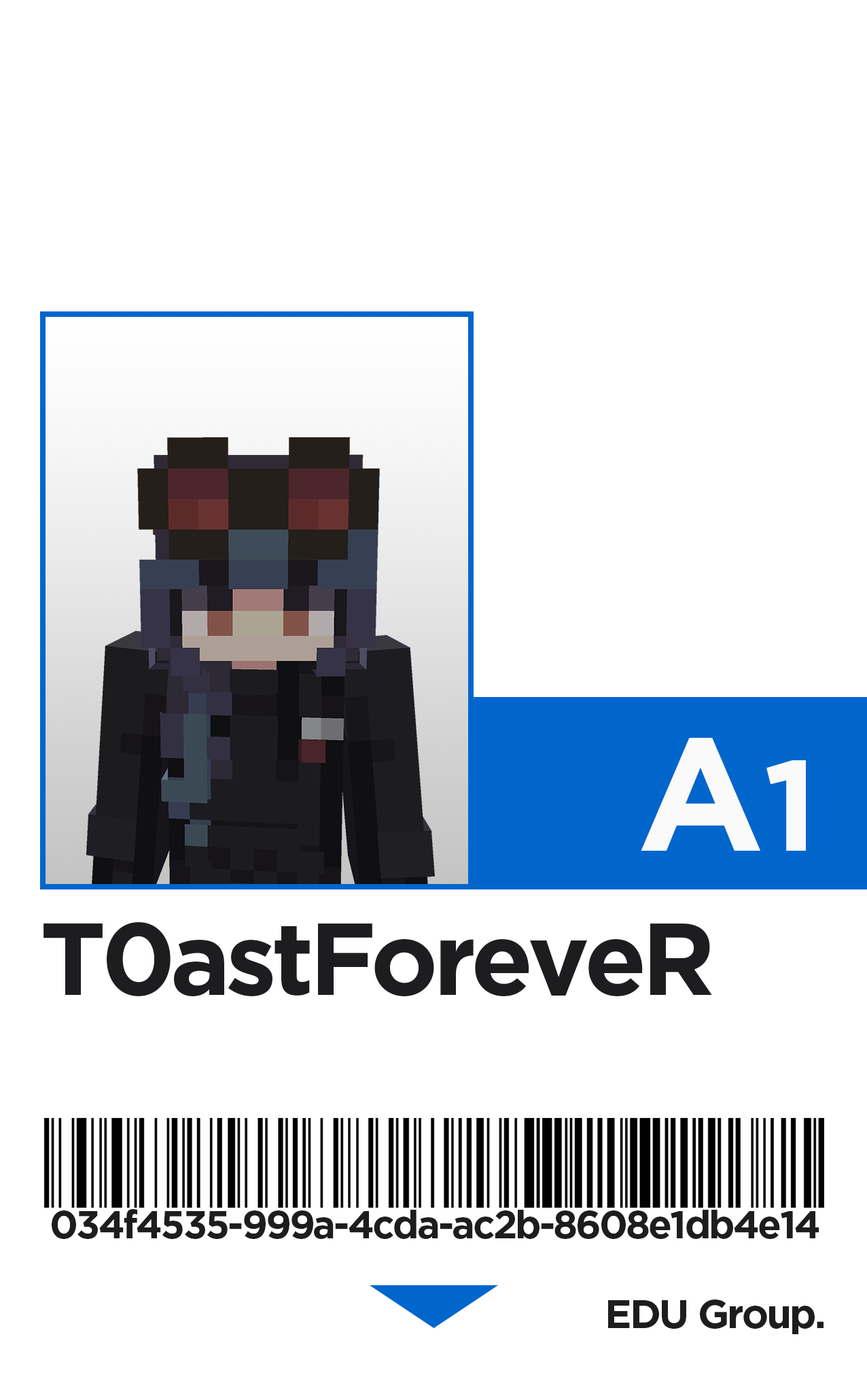
<style>
.page{position:relative;width:867px;height:1375px;background:#ffffff}
.page>*{position:absolute;margin:0}
.t1{font:160.6px "Gotham-Bold";color:#fafafa}
.t2{font:128.5px "Gotham-Bold";color:#fafafa}
.t3{font:102px "Gotham-Bold";letter-spacing:-0.05em;color:#1d1d1f}
.t4{font:38.8px "Gotham-Bold";letter-spacing:-0.05em;color:#1d1d1f}
.t5{font:40.1px "Gotham-Bold";letter-spacing:-0.05em;color:#1d1d1f}
</style>
<div class="page">
<p class="t1" style="left:641px;top:738px;width:165px;height:112px">A<span class="t2">1</span></p>
<p class="t3" style="left:44px;top:922px;width:668px;height:75px">T0astForeveR</p>
<p class="t4" style="left:52px;top:1209px;width:768px;height:30px">034f4535-999a-4cda-ac2b-8608e1db4e14</p>
<p class="t5" style="left:608px;top:1299px;width:216px;height:35px">EDU Group.</p>
</div>
